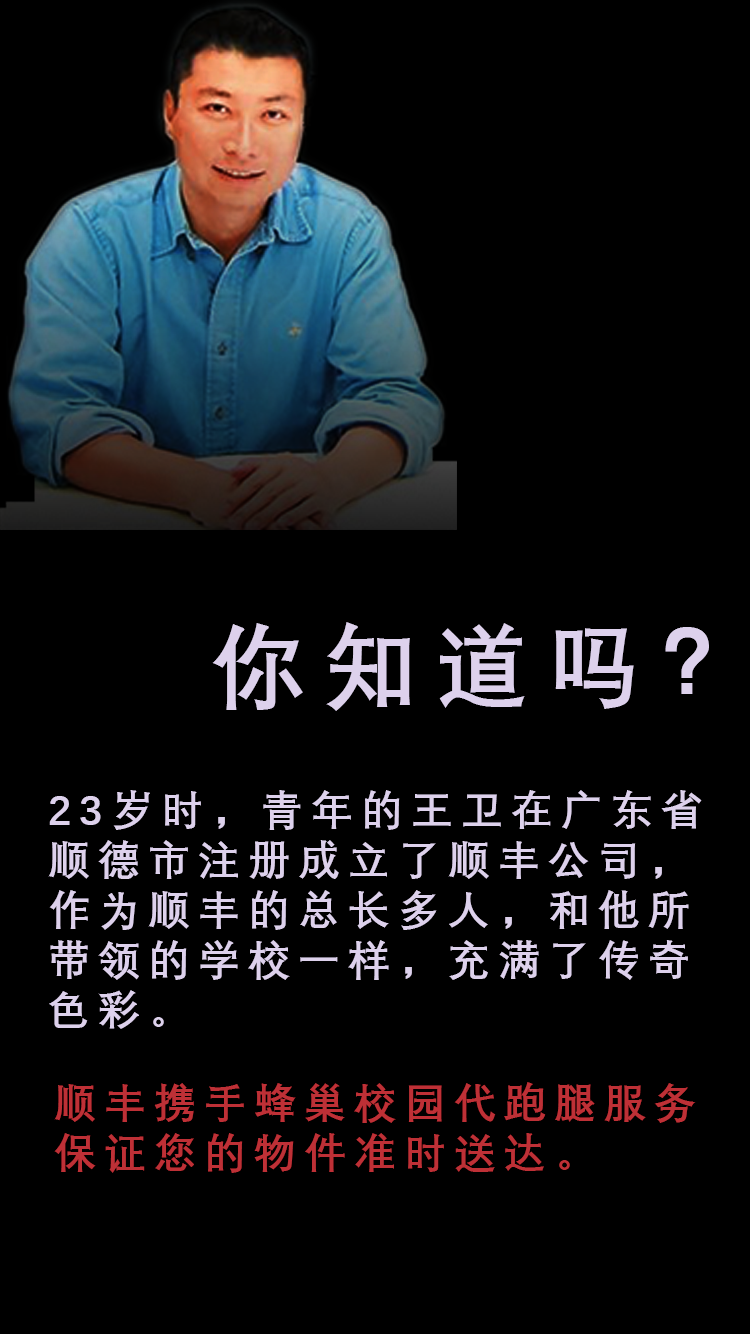
<style>
.page{position:relative;width:750px;height:1334px;background:#000000}
.page>*{position:absolute;margin:0}
.t1{font:93.2px "DengXian-Bold";letter-spacing:0.2em;color:#ddd1ec}
.t2{font:41.7px "DengXian-Bold";letter-spacing:0.2em;color:#ddd1ec}
.t3{font:41.7px "DengXian-Bold";letter-spacing:0.2em;color:#be3036}
</style>
<div class="page">
<p class="t1" style="left:212px;top:622px;width:497px;height:89px">你知道吗？</p>
<p class="t2" style="left:48px;top:790px;width:654px;height:239px">23岁时，青年的王卫在广东省<br>顺德市注册成立了顺丰公司，<br>作为顺丰的总长多人，和他所<br>带领的学校一样，充满了传奇<br>色彩。</p>
<p class="t3" style="left:54px;top:1082px;width:642px;height:91px">顺丰携手蜂巢校园代跑腿服务<br>保证您的物件准时送达。</p>
</div>
